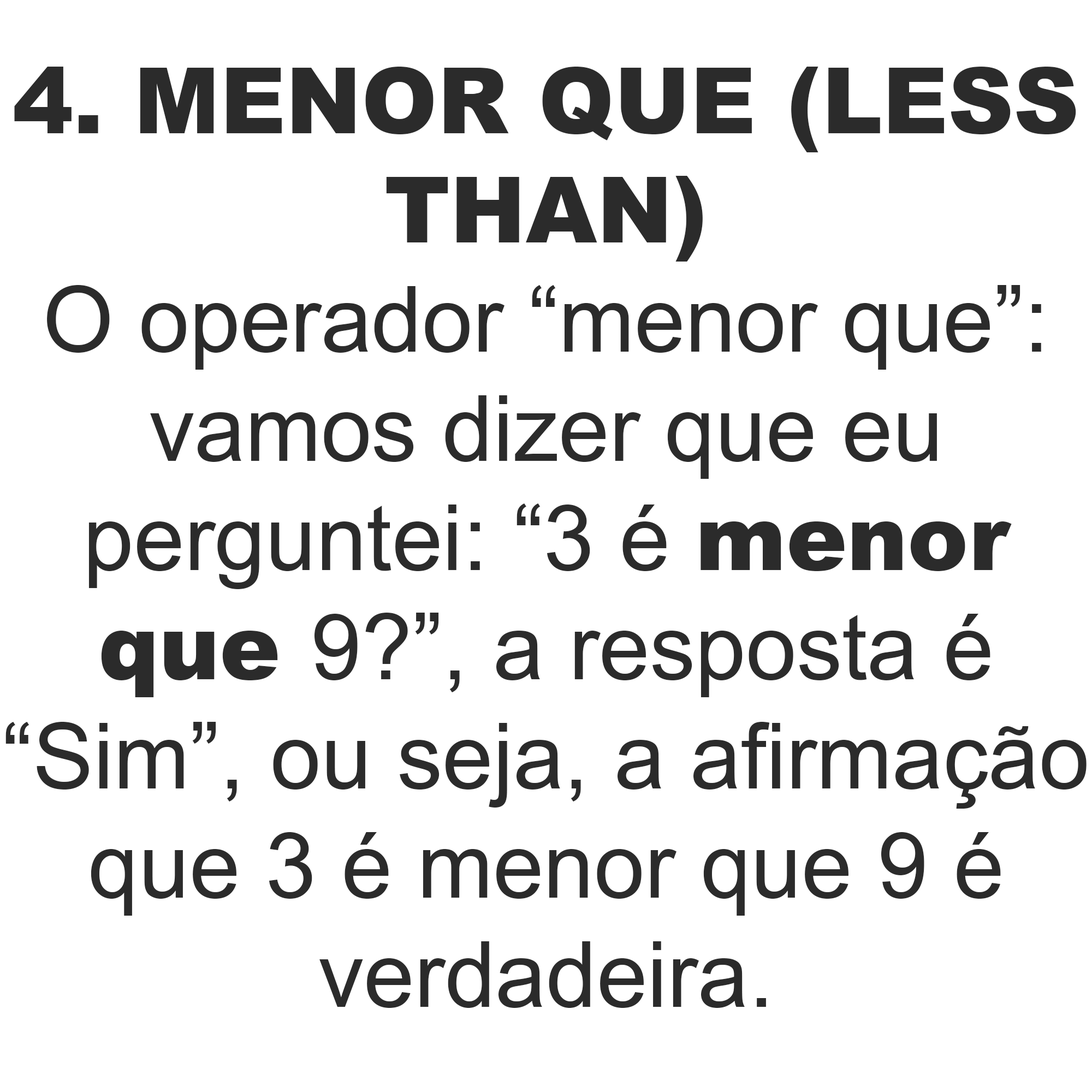
<style>
.page{position:relative;width:1092px;height:1092px;background:#ffffff}
.page>*{position:absolute;margin:0}
.t1{font:91px "ArialMT";color:#2b2b2b}
.t2{font:91px "Arial-Black";color:#2b2b2b}
</style>
<div class="page">
<p class="t1" style="left:5px;top:67px;width:1082px;height:941px;text-align:center"><span class="t2">4. MENOR QUE (LESS<br>THAN)<br></span>O operador “menor que”:<br>vamos dizer que eu<br>perguntei: “3 é <span class="t2">menor<br>que </span>9?”, a resposta é<br>“Sim”, ou seja, a afirmação<br>que 3 é menor que 9 é<br>verdadeira.</p>
</div>
